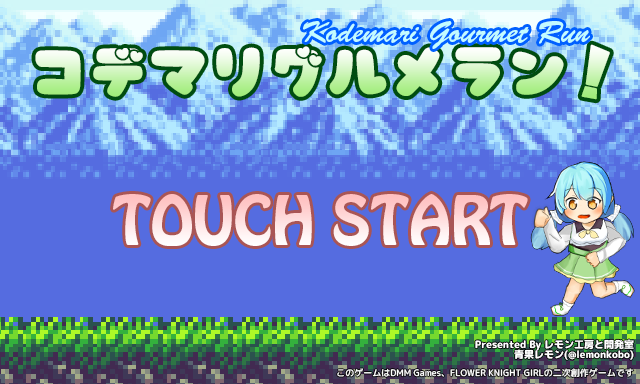
<style>
.page{position:relative;width:640px;height:384px;background:#556ce0}
.page>*{position:absolute;margin:0}
.t1{font:30px "BrushScriptStd";color:#c3fbff}
.t2{font:60px "MarshMallowPopHeartTTFLight-Regular"}
.t3{font:60px "AnnyantRoman"}
.t4{font:60px "HoboStd"}
.t5{font:10px/10px "rounded-mplus-1c-heavy";color:#ffffff}
.t6{font:9px "rounded-mplus-1c-medium";color:#ffffff}
</style>
<div class="page">
<p class="t1" style="left:303px;top:21px;width:287px;height:28px">Kodemari Gourmet Run</p>
<p class="t2" style="left:35px;top:46px;width:529px;height:51px">コデマリグルメラン</p>
<p class="t3" style="left:581px;top:44px;width:29px;height:56px">！</p>
<p class="t4" style="left:113px;top:194px;width:415px;height:52px">TOUCH START</p>
<p class="t5" style="left:475px;top:339px;width:159px;height:21px;text-align:right">Presented By レモン工房と開発室<br>青果レモン(@lemonkobo)</p>
<p class="t6" style="left:337px;top:368px;width:297px;height:9px">このゲームはDMM Games、FLOWER KNIGHT GIRLの二次創作ゲームです</p>
</div>
